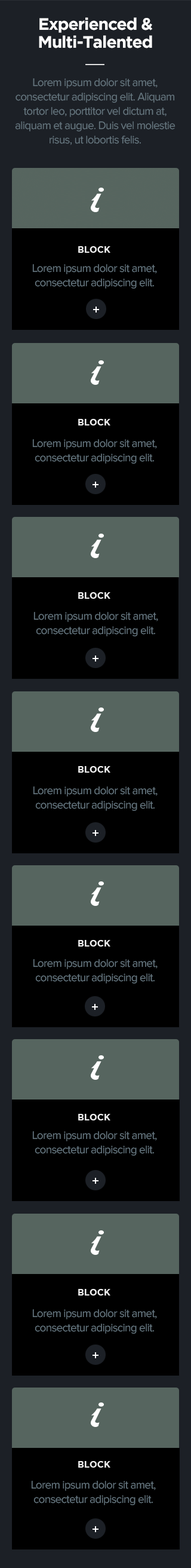
<style>
.page{position:relative;width:191px;height:1568px;background:#000000}
.page>*{position:absolute;margin:0}
.t1{font:16.7px/17.5px "GothamBold";letter-spacing:-0.04em;color:#ffffff}
.t2{font:11.4px/14.3px "ProximaNova-Regular";letter-spacing:-0.04em;color:#65757e}
.t3{font:9px "GothamBold";color:#ffffff;text-transform:uppercase}
</style>
<div class="page">
<p class="t1" style="left:39px;top:17px;width:114px;height:31px;text-align:center">Experienced &amp;<br>Multi-Talented</p>
<p class="t2" style="left:15px;top:78px;width:161px;height:67px;text-align:center">Lorem ipsum dolor sit amet, <br>consectetur adipiscing elit. Aliquam tortor leo, porttitor vel dictum at, <br>aliquam et augue. Duis vel molestie risus, ut lobortis felis.</p>
<p class="t3" style="left:78px;top:246px;width:33px;height:7px;opacity:0.9">Block</p>
<p class="t2" style="left:32px;top:264px;width:125px;height:25px;text-align:center">Lorem ipsum dolor sit amet, <br>consectetur adipiscing elit.</p>
<p class="t3" style="left:78px;top:419px;width:33px;height:6px;opacity:0.9">Block</p>
<p class="t2" style="left:32px;top:439px;width:125px;height:25px;text-align:center">Lorem ipsum dolor sit amet, <br>consectetur adipiscing elit.</p>
<p class="t3" style="left:78px;top:592px;width:33px;height:7px;opacity:0.9">Block</p>
<p class="t2" style="left:33px;top:612px;width:125px;height:24px;text-align:center">Lorem ipsum dolor sit amet, <br>consectetur adipiscing elit.</p>
<p class="t3" style="left:78px;top:766px;width:33px;height:7px;opacity:0.9">Block</p>
<p class="t2" style="left:33px;top:786px;width:125px;height:25px;text-align:center">Lorem ipsum dolor sit amet, <br>consectetur adipiscing elit.</p>
<p class="t3" style="left:78px;top:940px;width:33px;height:7px;opacity:0.9">Block</p>
<p class="t2" style="left:33px;top:959px;width:125px;height:25px;text-align:center">Lorem ipsum dolor sit amet, <br>consectetur adipiscing elit.</p>
<p class="t3" style="left:78px;top:1114px;width:33px;height:6px;opacity:0.9">Block</p>
<p class="t2" style="left:32px;top:1131px;width:125px;height:25px;text-align:center">Lorem ipsum dolor sit amet, <br>consectetur adipiscing elit.</p>
<p class="t3" style="left:78px;top:1289px;width:33px;height:7px;opacity:0.9">Block</p>
<p class="t2" style="left:32px;top:1309px;width:125px;height:25px;text-align:center">Lorem ipsum dolor sit amet, <br>consectetur adipiscing elit.</p>
<p class="t3" style="left:78px;top:1461px;width:33px;height:7px;opacity:0.9">Block</p>
<p class="t2" style="left:31px;top:1481px;width:125px;height:24px;text-align:center">Lorem ipsum dolor sit amet, <br>consectetur adipiscing elit.</p>
</div>
